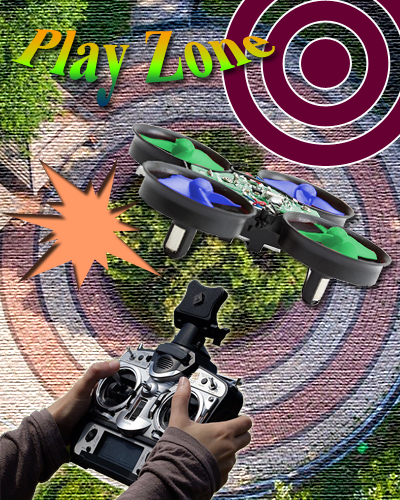
<style>
.page{position:relative;width:400px;height:500px}
.page>*{position:absolute;margin:0}
.t1{font:48px "TimesNewRomanPS-BoldMT"}
</style>
<div class="page">
<p class="t1" style="left:11px;top:29px;width:264px;height:78px">Play Zone</p>
</div>
